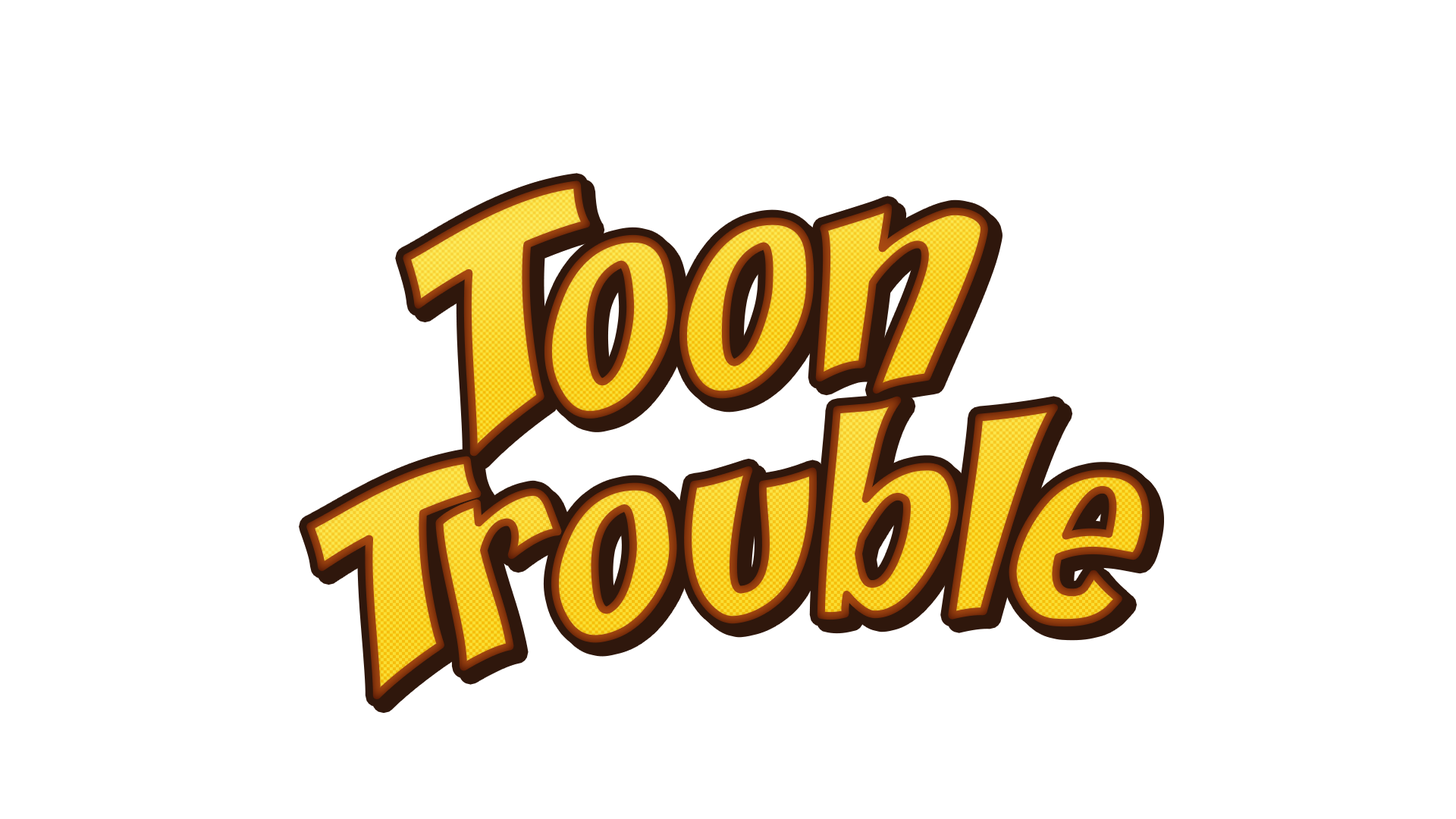
<style>
.page{position:relative;width:1456px;height:819px;background:#ffffff}
.page>*{position:absolute;margin:0}
.t1{font:286.6px "Yikes"}
.t2{font:249.4px "Yikes";scale:1.14 1}
</style>
<div class="page">
<p class="t1" style="left:406px;top:184px;width:578px;height:269px;rotate:-7deg">Toon</p>
<p class="t2" style="left:310px;top:400px;width:836px;height:296px;rotate:-4deg">Trouble</p>
</div>
